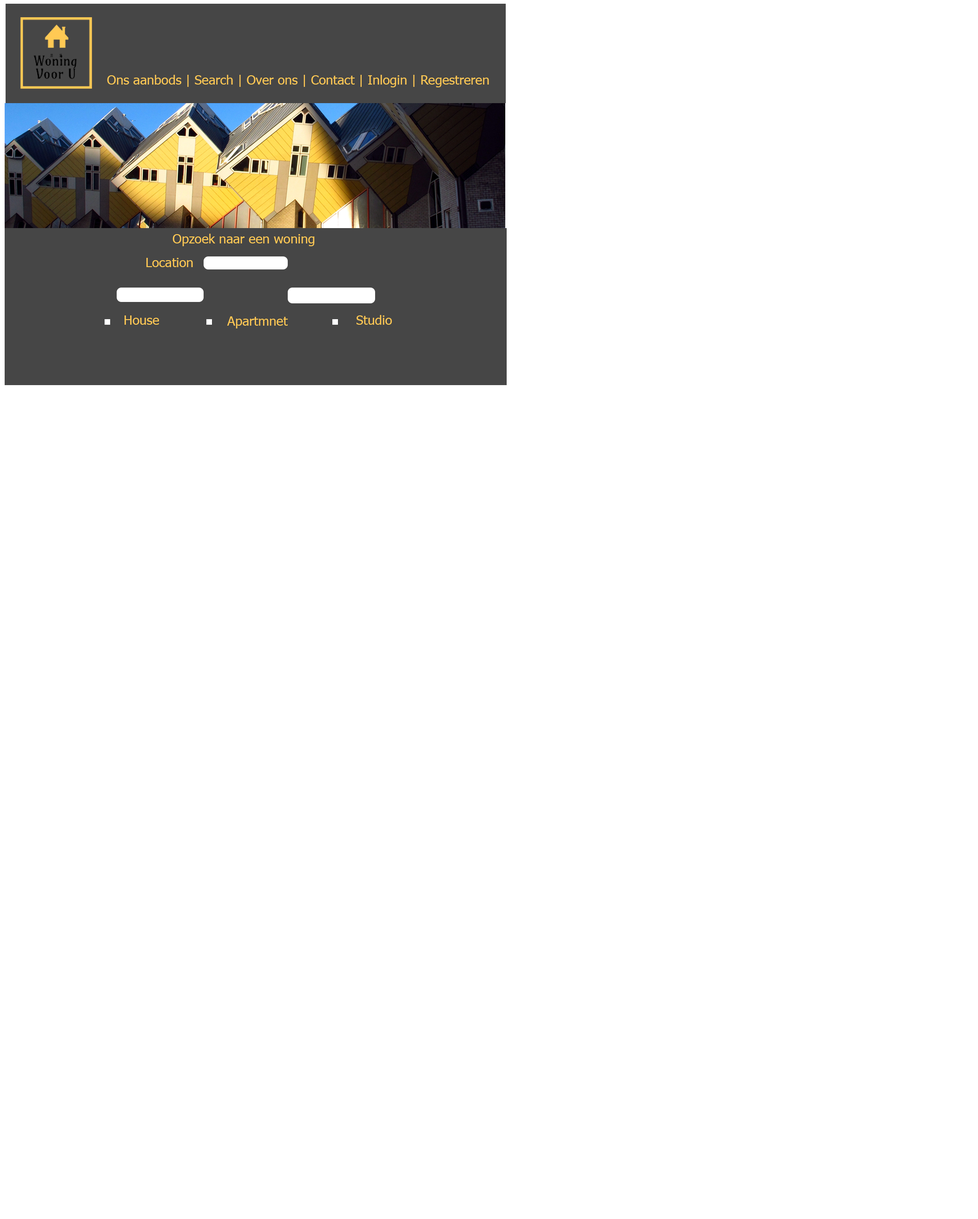
<style>
.page{position:relative;width:978px;height:1219px;background:#ffffff}
.page>*{position:absolute;margin:0}
.t1{font:13px "Tahoma";color:#ffc954}
</style>
<div class="page">
<p class="t1" style="left:107px;top:75px;width:382px;height:12px">Ons aanbods | Search | Over ons | Contact | Inlogin | Regestreren</p>
<p class="t1" style="left:172px;top:234px;width:143px;height:12px">Opzoek naar een woning</p>
<p class="t1" style="left:146px;top:258px;width:47px;height:9px">Location</p>
<p class="t1" style="left:125px;top:316px;width:34px;height:9px">House</p>
<p class="t1" style="left:227px;top:316px;width:61px;height:13px">Apartmnet</p>
<p class="t1" style="left:356px;top:315px;width:36px;height:10px">Studio</p>
</div>
